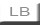
<style>
.page{position:relative;width:40px;height:25px;background:#ffffff}
.page>*{position:absolute;margin:0}
.t1{font:13.8px "Shruti";color:#8e8d8d;scale:1.36 1}
</style>
<div class="page">
<p class="t1" style="left:10px;top:7px;width:20px;height:9px">LB</p>
</div>
